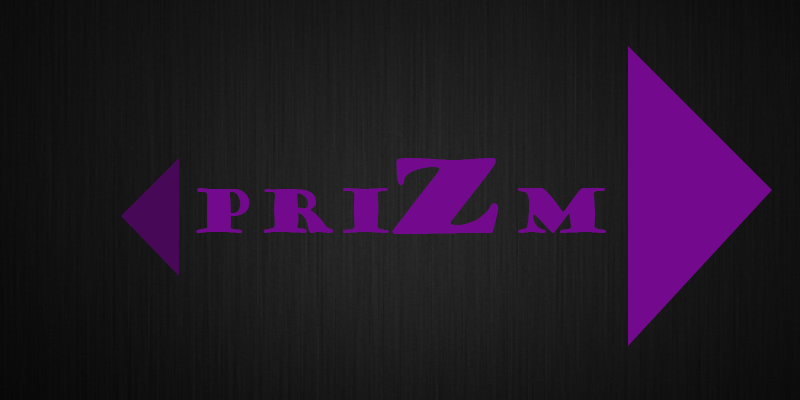
<style>
.page{position:relative;width:800px;height:400px}
.page>*{position:absolute;margin:0}
.t1{font:100px "GoudyStout";color:#730a8d}
.t2{font:58.3px "GoudyStout";color:#730a8d}
</style>
<div class="page">
<p class="t1" style="left:392px;top:158px;width:107px;height:76px">Z</p>
<p class="t2" style="left:196px;top:188px;width:410px;height:45px">Pri    M</p>
</div>
